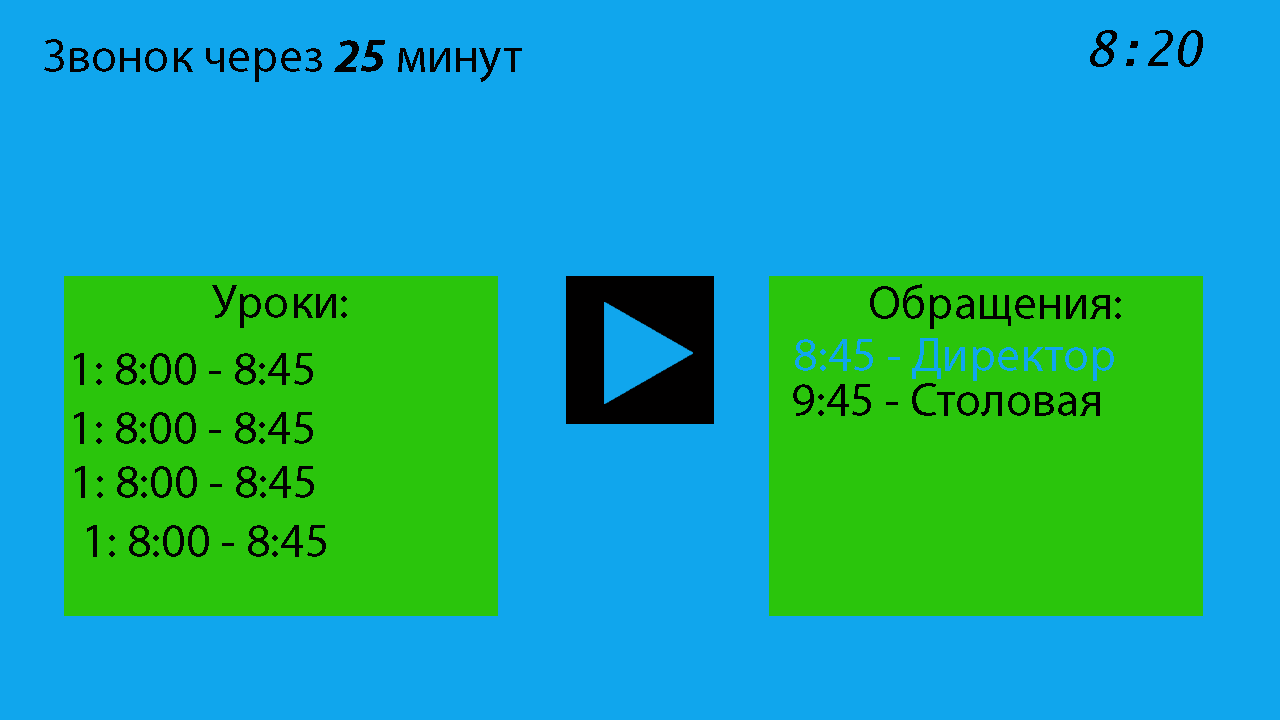
<style>
.page{position:relative;width:1280px;height:720px;background:#10a6ed}
.page>*{position:absolute;margin:0}
.t1{font:48px "LucidaSans-TypewriterOblique";color:#000000}
.t2{font:48px "MyriadPro-Regular";color:#020202}
.t3{font:48px "MyriadPro-BoldIt";color:#020202}
.t4{font:48px "MyriadPro-Regular";color:#010000}
.t5{font:48px "MyriadPro-Regular";color:#10a6ed}
.t6{font:48px "MyriadPro-Regular";color:#000000}
</style>
<div class="page">
<p class="t1" style="left:1090px;top:30px;width:113px;height:37px">8:20</p>
<p class="t2" style="left:44px;top:39px;width:478px;height:43px">Звонок через <span class="t3">25</span> минут</p>
<p class="t2" style="left:212px;top:285px;width:135px;height:43px">Уроки:</p>
<p class="t4" style="left:870px;top:284px;width:251px;height:45px">Обращения:</p>
<p class="t5" style="left:795px;top:338px;width:319px;height:43px">8:45 - Директор</p>
<p class="t2" style="left:74px;top:353px;width:239px;height:32px">1: 8:00 - 8:45</p>
<p class="t6" style="left:793px;top:383px;width:307px;height:33px">9:45 - Столовая</p>
<p class="t2" style="left:74px;top:412px;width:239px;height:32px">1: 8:00 - 8:45</p>
<p class="t2" style="left:75px;top:466px;width:239px;height:32px">1: 8:00 - 8:45</p>
<p class="t2" style="left:87px;top:525px;width:239px;height:32px">1: 8:00 - 8:45</p>
</div>
